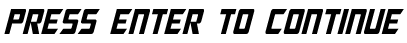
<style>
.page{position:relative;width:407px;height:43px;background:#ffffff}
.page>*{position:absolute;margin:0}
.t1{font:36px "MegatronCondensed-Italic";color:#000000}
</style>
<div class="page">
<p class="t1" style="left:4px;top:9px;width:400px;height:25px">press enter to continue</p>
</div>
